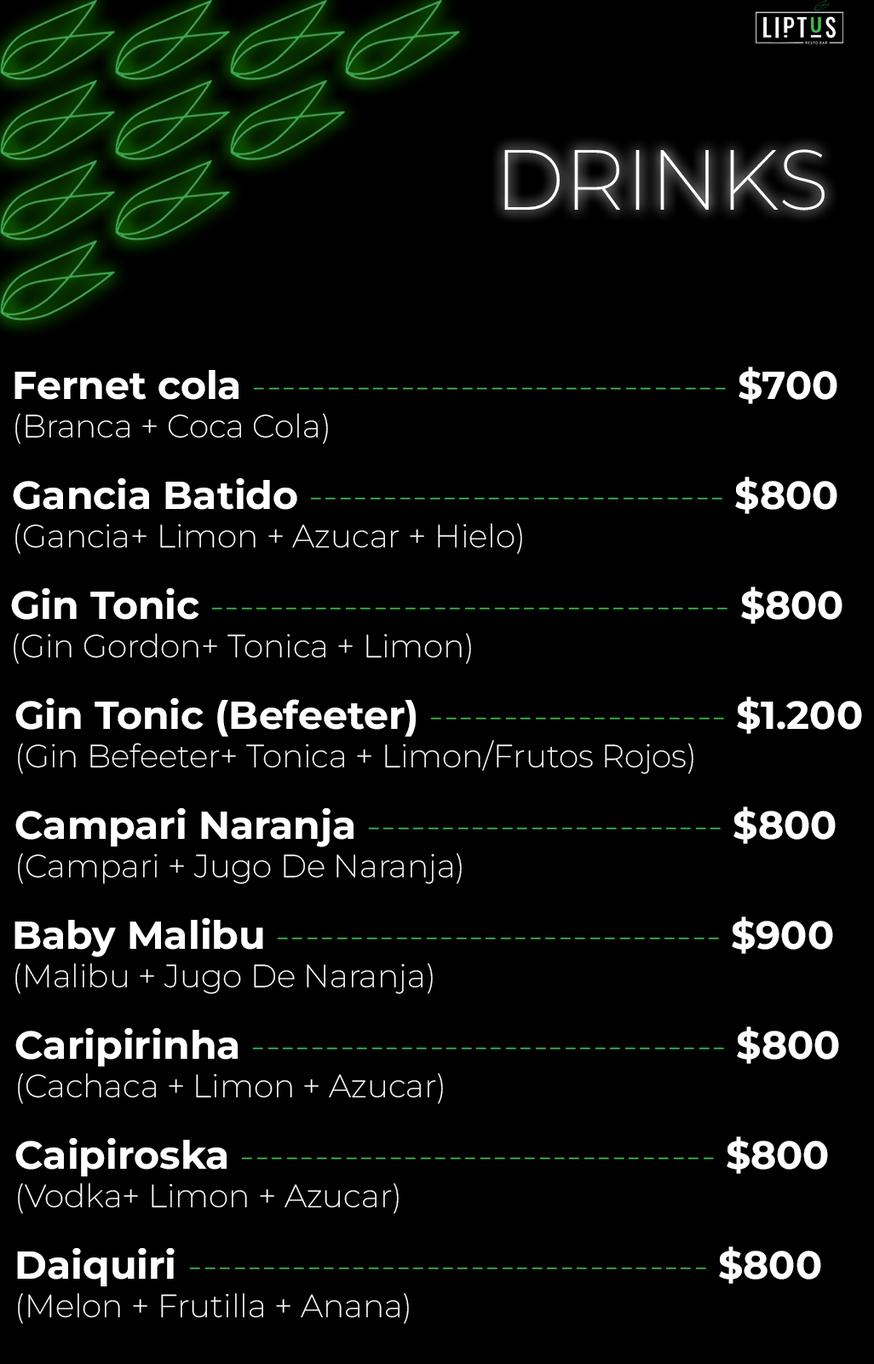
<style>
.page{position:relative;width:874px;height:1364px;background:#000000}
.page>*{position:absolute;margin:0}
.t1{font:85.2px "Montserrat-ExtraLight";color:#ffffff}
.t2{font:39.1px "Montserrat-ExtraLight";color:#39b54a}
.t3{font:39.1px "Montserrat-Bold";color:#ffffff}
.t4{font:32px "Montserrat-ExtraLight";color:#ffffff}
</style>
<div class="page">
<p class="t1" style="left:505px;top:149px;width:320px;height:62px">DRINKS</p>
<p class="t2" style="left:14px;top:366px;width:824px;height:78px"><span class="t3">Fernet cola </span>-------------------------------- <span class="t3">$700<br></span><span class="t4">(Branca + Coca Cola)</span></p>
<p class="t4" style="left:13px;top:476px;width:825px;height:78px"><span class="t3">Gancia Batido </span><span class="t2">---------------------------- </span><span class="t3">$800<br></span>(Gancia+ Limon + Azucar + Hielo)</p>
<p class="t2" style="left:11px;top:586px;width:832px;height:78px"><span class="t3">Gin Tonic </span>----------------------------------- <span class="t3">$800<br></span><span class="t4">(Gin Gordon+ Tonica + Limon)</span></p>
<p class="t4" style="left:15px;top:696px;width:848px;height:78px"><span class="t3">Gin Tonic (Befeeter) </span><span class="t2">-------------------- </span><span class="t3">$1.200<br></span>(Gin Befeeter+ Tonica + Limon/Frutos Rojos)</p>
<p class="t4" style="left:15px;top:806px;width:821px;height:78px"><span class="t3">Campari Naranja </span><span class="t2">------------------------ </span><span class="t3">$800<br></span>(Campari + Jugo De Naranja)</p>
<p class="t2" style="left:14px;top:916px;width:820px;height:78px"><span class="t3">Baby Malibu </span>------------------------------ <span class="t3">$900<br></span><span class="t4">(Malibu + Jugo De Naranja)</span></p>
<p class="t2" style="left:15px;top:1026px;width:824px;height:78px"><span class="t3">Caripirinha </span>-------------------------------- <span class="t3">$800<br></span><span class="t4">(Cachaca + Limon + Azucar)</span></p>
<p class="t2" style="left:15px;top:1136px;width:813px;height:78px"><span class="t3">Caipiroska </span>-------------------------------- <span class="t3">$800<br></span><span class="t4">(Vodka+ Limon + Azucar)</span></p>
<p class="t2" style="left:17px;top:1246px;width:805px;height:78px"><span class="t3">Daiquiri </span>----------------------------------- <span class="t3">$800<br></span><span class="t4">(Melon + Frutilla + Anana)</span></p>
</div>
